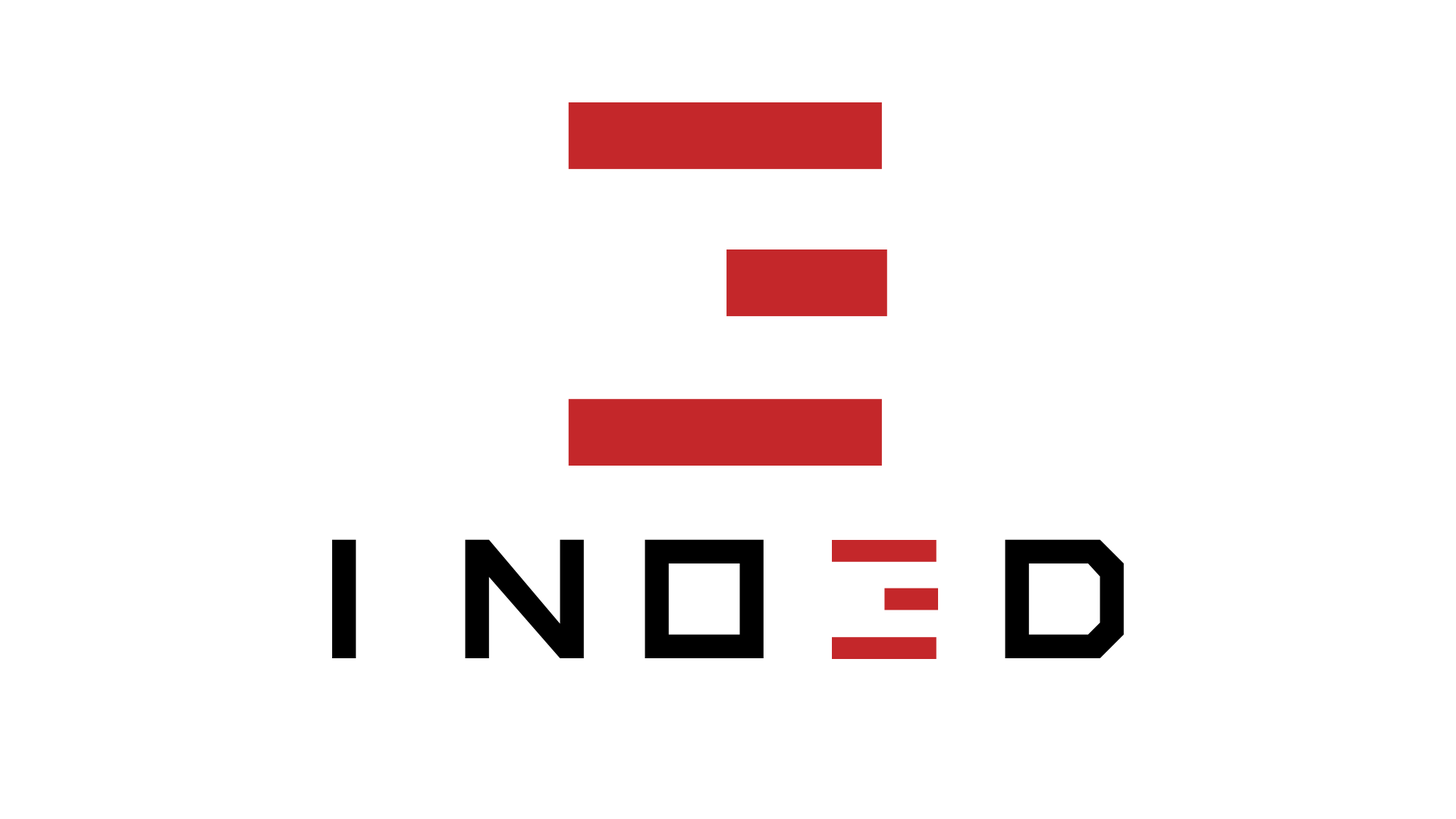
<style>
.page{position:relative;width:1456px;height:819px;background:#ffffff}
.page>*{position:absolute;margin:0}
.t1{font:379.2px "InversionzUnboxed";letter-spacing:-0.15em;color:#000000}
</style>
<div class="page">
<p class="t1" style="left:332px;top:539px;width:792px;height:119px">INO D</p>
</div>
